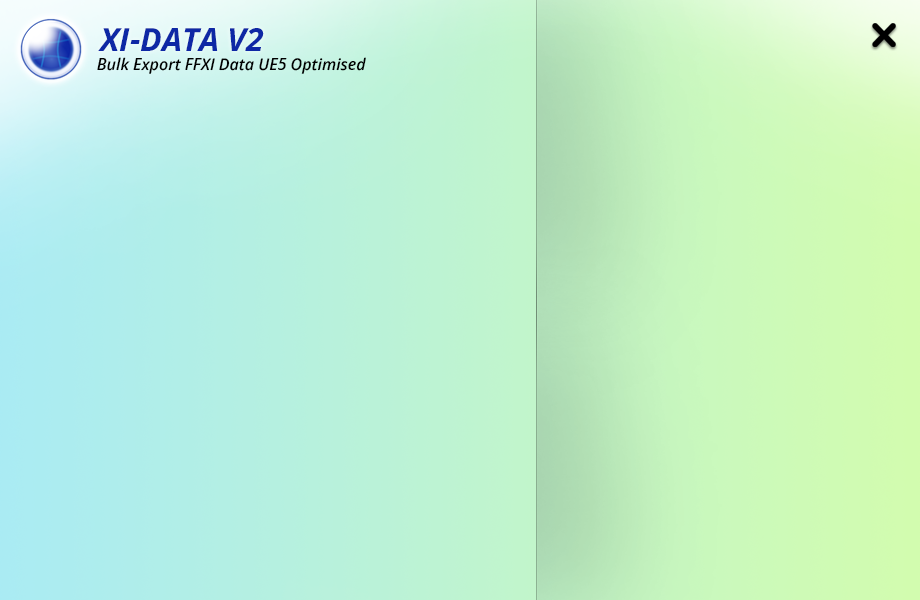
<style>
.page{position:relative;width:920px;height:600px}
.page>*{position:absolute;margin:0}
.t1{font:32px "OpenSans-BoldItalic";color:#0e28a5}
.t2{font:16px "OpenSans-SemiBoldItalic";color:#000000}
</style>
<div class="page">
<p class="t1" style="left:98px;top:28px;width:166px;height:23px">XI-DATA V2</p>
<p class="t2" style="left:97px;top:57px;width:269px;height:17px">Bulk Export FFXI Data UE5 Optimised</p>
</div>
